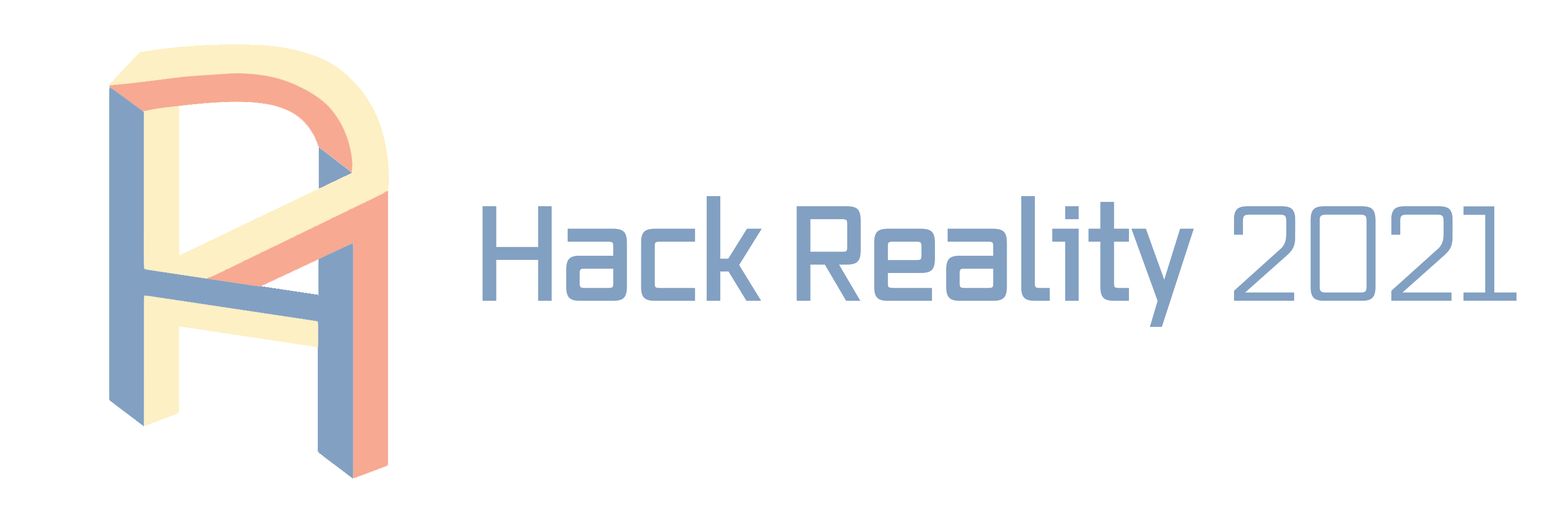
<style>
.page{position:relative;width:1568px;height:523px;background:#ffffff}
.page>*{position:absolute;margin:0}
.t1{font:130.7px "Vox-Semibold";color:#82a0c2}
.t2{font:130.7px "Vox";color:#82a0c2}
</style>
<div class="page">
<p class="t1" style="left:482px;top:196px;width:1035px;height:131px">Hack Reality <span class="t2">2021</span></p>
</div>
